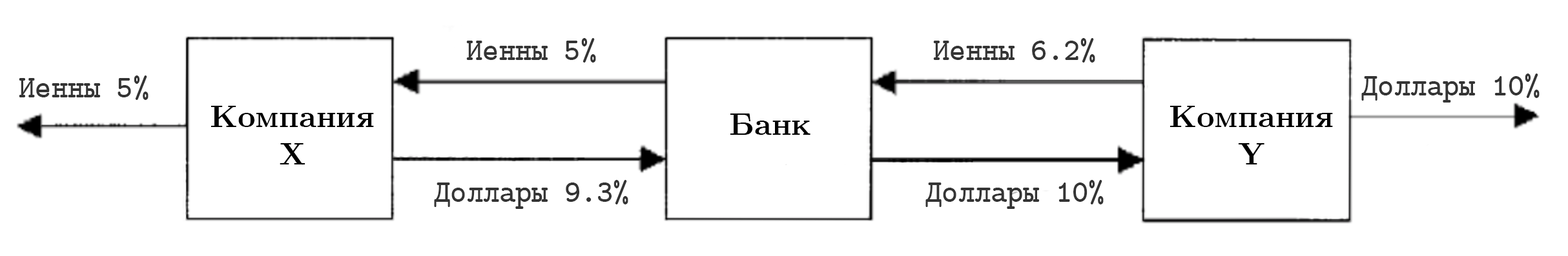
<style>
.page{position:relative;width:1568px;height:256px;background:#ffffff}
.page>*{position:absolute;margin:0}
.t1{font:31px "CMUTypewriter-Bold";color:#343434}
.t2{font:31px "CMUSerif-Bold";color:#000000}
</style>
<div class="page">
<p class="t1" style="left:466px;top:38px;width:130px;height:25px">Иенны 5%</p>
<p class="t1" style="left:933px;top:38px;width:162px;height:25px">Иенны 6.2%</p>
<p class="t1" style="left:19px;top:76px;width:130px;height:24px">Иенны 5%</p>
<p class="t1" style="left:1361px;top:74px;width:179px;height:29px">Доллары 10%</p>
<p class="t2" style="left:211px;top:106px;width:163px;height:59px;text-align:center">Компания<br>X</p>
<p class="t2" style="left:730px;top:114px;width:80px;height:21px">Банк</p>
<p class="t2" style="left:1170px;top:106px;width:163px;height:59px;text-align:center">Компания<br>Y</p>
<p class="t1" style="left:434px;top:180px;width:194px;height:29px">Доллары 9.3%</p>
<p class="t1" style="left:925px;top:180px;width:179px;height:29px">Доллары 10%</p>
</div>
